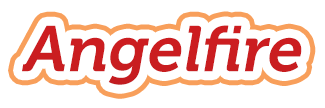
<style>
.page{position:relative;width:325px;height:108px;background:#ffffff}
.page>*{position:absolute;margin:0}
.t1{font:64px "Museo-700";color:#d42027;font-style:italic}
</style>
<div class="page">
<p class="t1" style="left:22px;top:25px;width:280px;height:60px">Angelfire</p>
</div>
